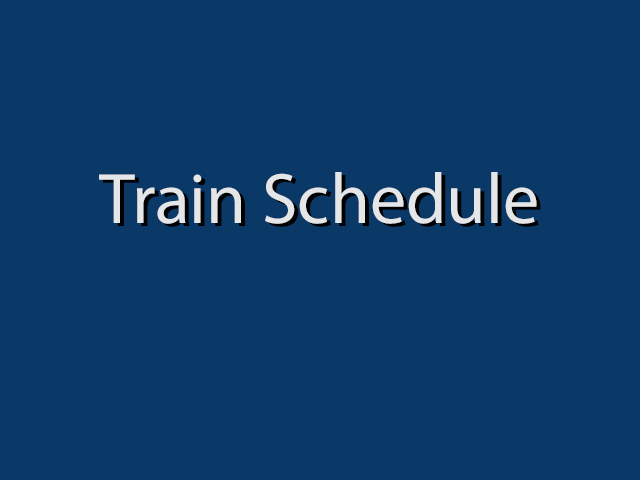
<style>
.page{position:relative;width:640px;height:480px;background:#0b3967}
.page>*{position:absolute;margin:0}
.t1{font:72px "MyriadPro-Regular";color:#e4e6e8}
</style>
<div class="page">
<p class="t1" style="left:99px;top:172px;width:438px;height:52px">Train Schedule</p>
</div>
